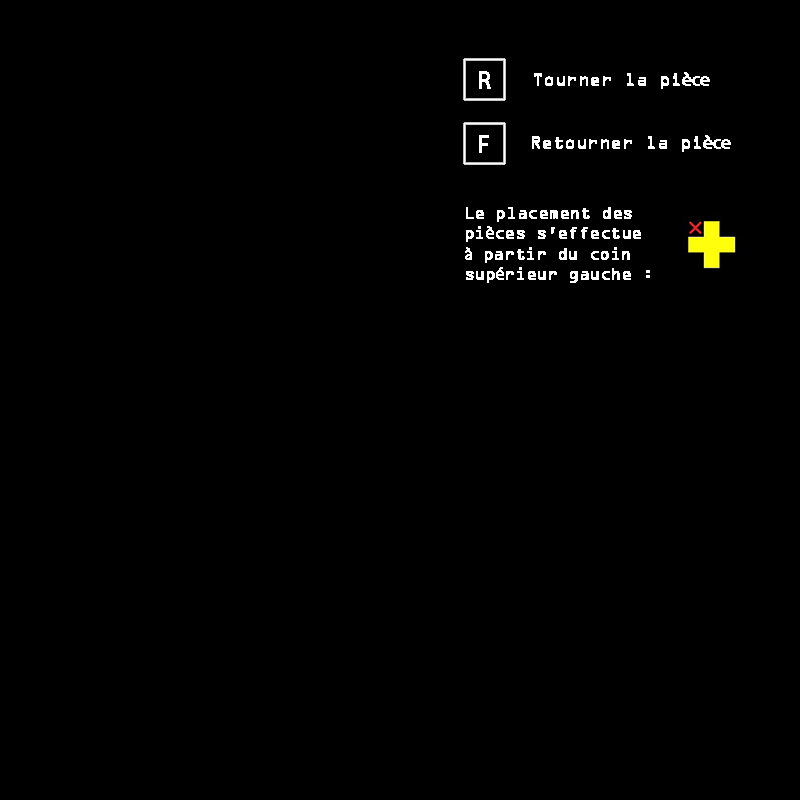
<style>
.page{position:relative;width:800px;height:800px;background:#000000}
.page>*{position:absolute;margin:0}
.t1{font:24px "MyriadPro-Regular";letter-spacing:-0.025em;color:#ffffff;font-weight:bold}
.t2{font:18px "OCR-AII";letter-spacing:-0.025em;color:#ffffff;font-weight:bold}
.t3{font:18px "MyriadPro-Regular";letter-spacing:-0.025em;color:#ffffff;font-weight:bold}
.t4{font:17px "OCR-AII";letter-spacing:-0.025em;color:#ffffff;font-weight:bold}
.t5{font:17px "MyriadPro-Regular";letter-spacing:-0.025em;color:#ffffff;font-weight:bold}
</style>
<div class="page">
<p class="t1" style="left:479px;top:71px;width:12px;height:18px">R</p>
<p class="t2" style="left:534px;top:72px;width:176px;height:17px">Tourner la pi<span class="t3">èce</span></p>
<p class="t1" style="left:479px;top:135px;width:10px;height:18px">F</p>
<p class="t2" style="left:532px;top:135px;width:199px;height:17px">Retourner la pi<span class="t3">èce</span></p>
<p class="t4" style="left:465px;top:207px;width:185px;height:76px">Le placement des<br>pi<span class="t5">è</span>ces s'effectue    <br><span class="t5">à</span> partir du coin<br>sup<span class="t5">é</span>rieur gauche :</p>
</div>
